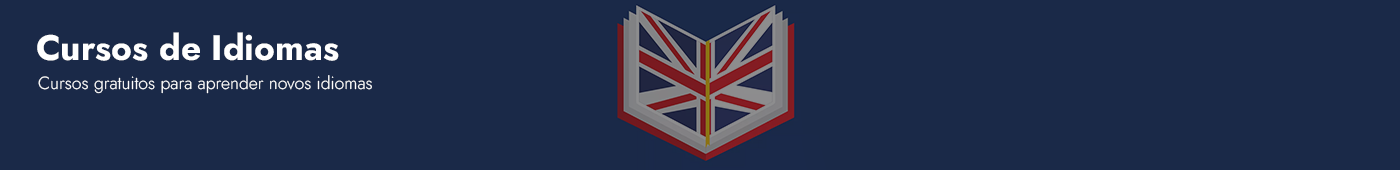
<style>
.page{position:relative;width:1400px;height:170px;background:#1a2948}
.page>*{position:absolute;margin:0}
.t1{font:35.3px "Jost-Bold";color:#ffffff}
.t2{font:17.6px "Jost-Light";color:#ffffff}
</style>
<div class="page">
<p class="t1" style="left:37px;top:32px;width:302px;height:29px">Cursos de Idiomas</p>
<p class="t2" style="left:38px;top:75px;width:334px;height:19px">Cursos gratuitos para aprender novos idiomas</p>
</div>
